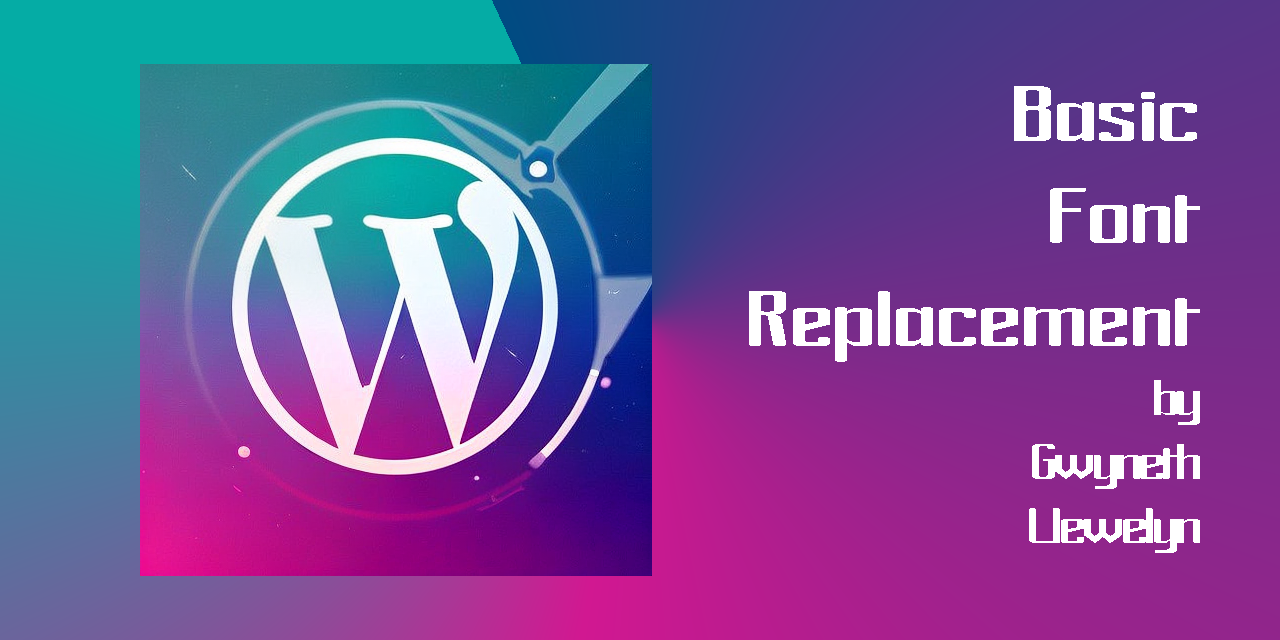
<style>
.page{position:relative;width:1280px;height:640px}
.page>*{position:absolute;margin:0}
.t1{font:85.3px "ArdourGM";color:#ffffff;scale:1.3 1}
.t2{font:53.3px "ArdourGM";letter-spacing:-0.05em;color:#ffffff;scale:1.3 1}
</style>
<div class="page">
<p class="t1" style="left:749px;top:86px;width:451px;height:276px;text-align:right">Basic<br>Font<br>Replacement</p>
<p class="t2" style="left:1029px;top:380px;width:171px;height:173px;text-align:right">by<br>Gwyneth<br>Llewelyn</p>
</div>
